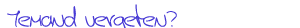
<style>
.page{position:relative;width:300px;height:28px;background:#ffffff}
.page>*{position:absolute;margin:0}
.t1{font:22.8px "Jerry'shandwriting";color:#483ad5;scale:1.16 1}
</style>
<div class="page">
<p class="t1" style="left:7px;top:4px;width:170px;height:24px">Iemand vergeten?</p>
</div>
